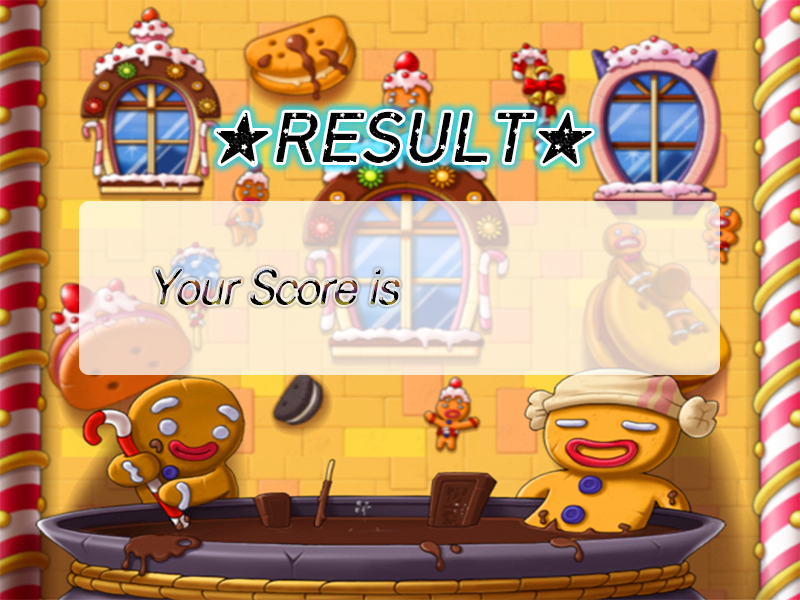
<style>
.page{position:relative;width:800px;height:600px}
.page>*{position:absolute;margin:0}
.t1{font:65px "HCRDotum";color:#020202;font-weight:bold;font-style:italic}
.t2{font:45px "KoPubWorldDotumLight";letter-spacing:-0.06em;font-weight:bold;font-style:italic}
</style>
<div class="page">
<p class="t1" style="left:216px;top:111px;width:376px;height:53px">★RESULT★</p>
<p class="t2" style="left:154px;top:268px;width:246px;height:38px">Your Score is</p>
</div>
